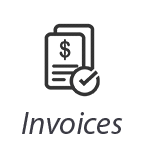
<style>
.page{position:relative;width:142px;height:142px;background:#ffffff}
.page>*{position:absolute;margin:0}
.t1{font:32px "MyriadPro-It";color:#3b3b44}
</style>
<div class="page">
<p class="t1" style="left:22px;top:112px;width:101px;height:22px">Invoices</p>
</div>
